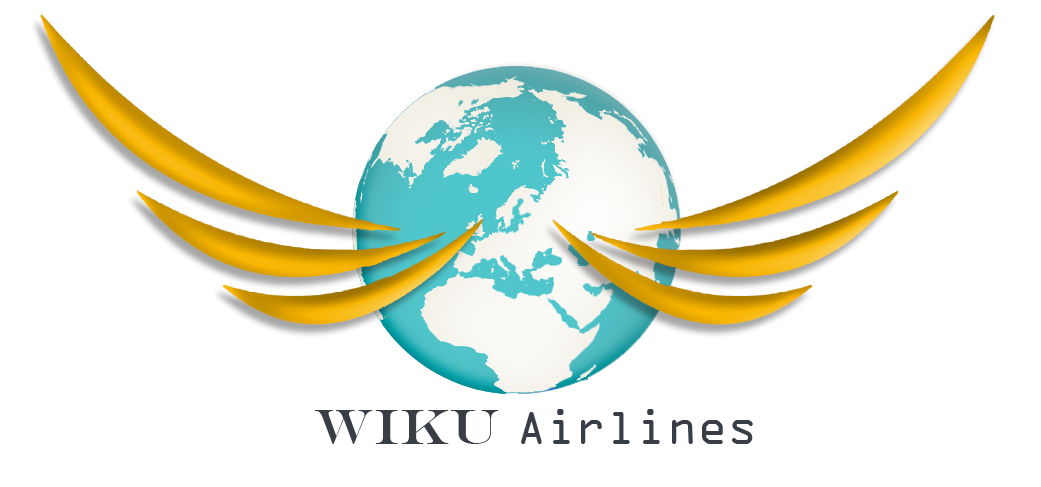
<style>
.page{position:relative;width:1041px;height:487px;background:#ffffff}
.page>*{position:absolute;margin:0}
.t1{font:50px "OCRAExtended";color:#393e46}
.t2{font:50px "EngraversMT";color:#393e46}
</style>
<div class="page">
<p class="t1" style="left:315px;top:409px;width:438px;height:35px"><span class="t2">WIKU </span>Airlines</p>
</div>
